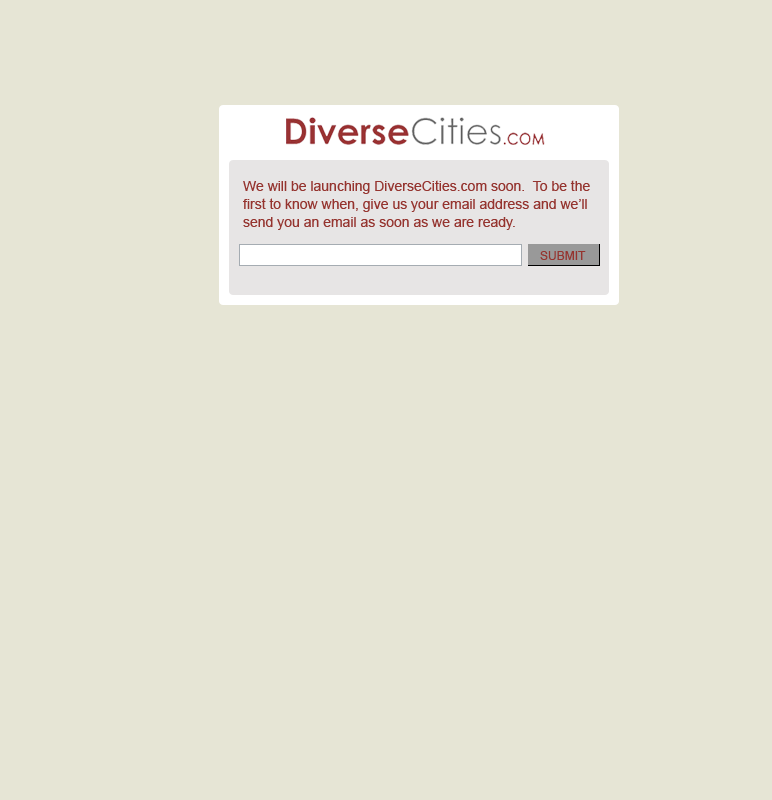
<style>
.page{position:relative;width:772px;height:800px;background:#e6e5d5}
.page>*{position:absolute;margin:0}
.t1{font:14px/18px "ArialMT";color:#95342f}
.t2{font:12px "ArialMT";color:#95342f}
</style>
<div class="page">
<p class="t1" style="left:243px;top:180px;width:347px;height:50px">We will be launching DiverseCities.com soon.  To be the <br>first to know when, give us your email address and we’ll <br>send you an email as soon as we are ready.</p>
<p class="t2" style="left:540px;top:251px;width:46px;height:9px">SUBMIT</p>
</div>
